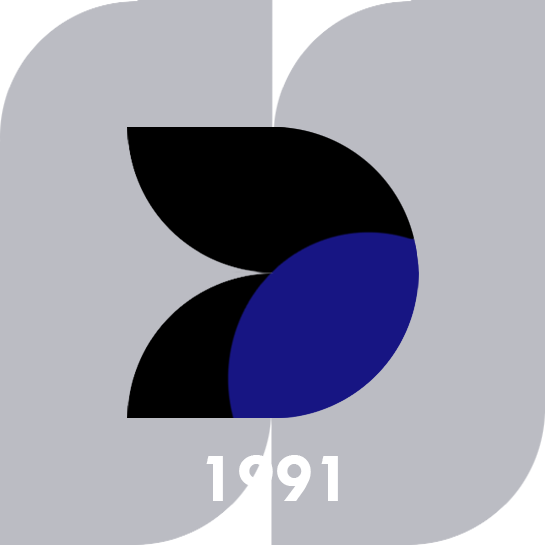
<style>
.page{position:relative;width:545px;height:545px;background:#bbbcc3}
.page>*{position:absolute;margin:0}
.t1{font:72px "TwCenMT-Bold";color:#ffffff}
</style>
<div class="page">
<p class="t1" style="left:206px;top:455px;width:132px;height:46px">1991</p>
</div>
